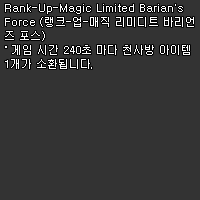
<style>
.page{position:relative;width:200px;height:200px;background:#333333}
.page>*{position:absolute;margin:0}
.t1{font:11px/14px "Dotum";color:#ffffff}
</style>
<div class="page">
<p class="t1" style="left:5px;top:4px;width:189px;height:65px">Rank-Up-Magic Limited Barian's <br>Force (랭크-업-매직 리미디트 바리언<br>즈 포스)<br>˚ 게임 시간 240초 마다 천사방 아이템<br>1개가 소환됩니다.</p>
</div>
